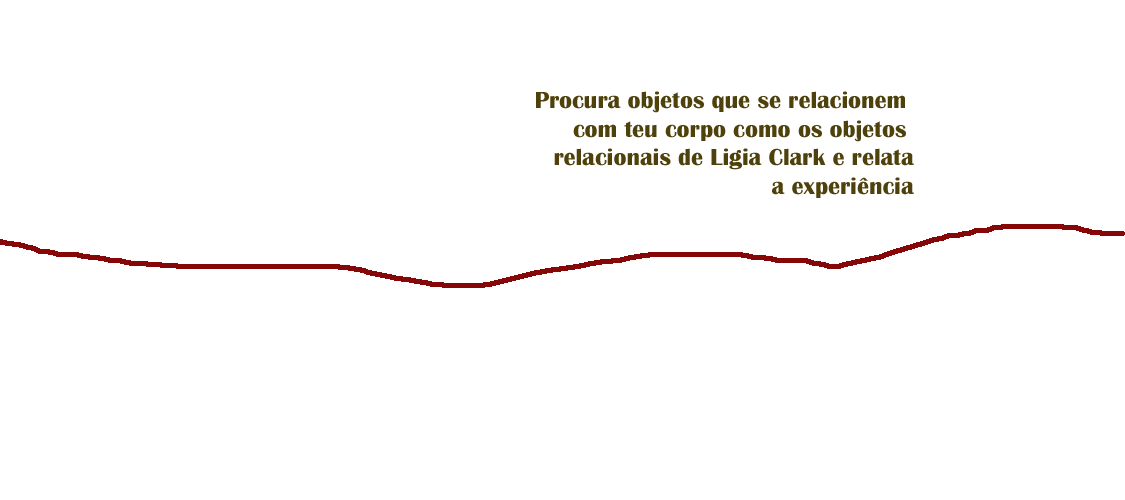
<style>
.page{position:relative;width:1125px;height:500px;background:#ffffff}
.page>*{position:absolute;margin:0}
.t1{font:24px "BritannicBold";color:#4e410b}
</style>
<div class="page">
<p class="t1" style="left:536px;top:91px;width:378px;height:107px;text-align:right">Procura objetos que se relacionem <br>com teu corpo como os objetos <br>relacionais de Ligia Clark e relata<br>a experiência</p>
</div>
